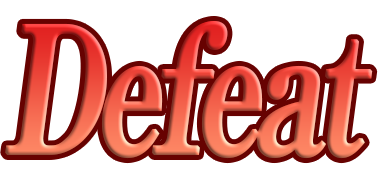
<style>
.page{position:relative;width:378px;height:180px;background:#ffffff}
.page>*{position:absolute;margin:0}
.t1{font:174px "RyuminPro-ExBold";letter-spacing:-0.08em;font-weight:bold;font-style:italic;scale:0.75 1}
</style>
<div class="page">
<p class="t1" style="left:5px;top:21px;width:368px;height:138px">Defeat</p>
</div>
